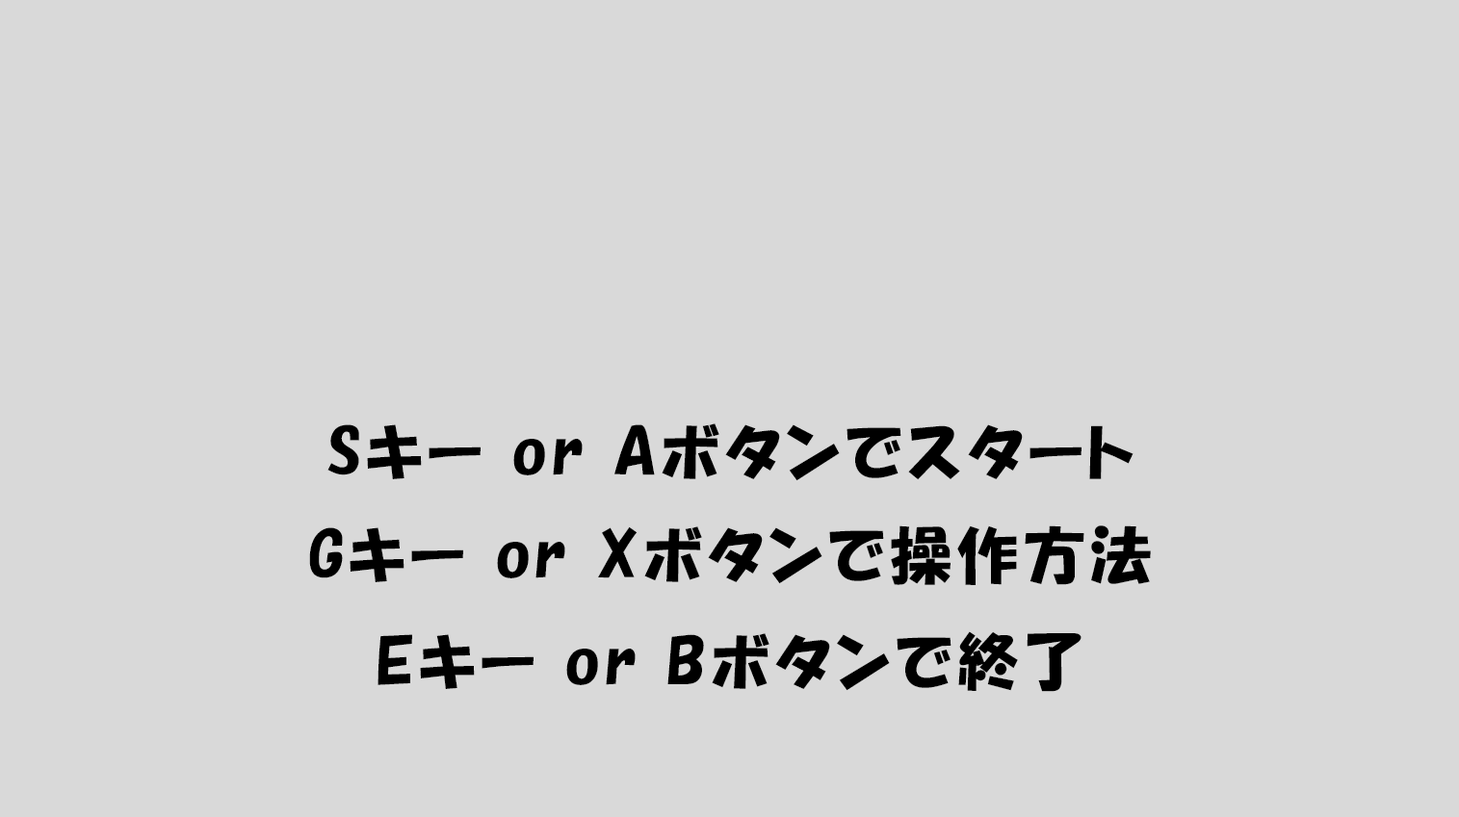
<style>
.page{position:relative;width:1459px;height:817px;background:#d9d9d9}
.page>*{position:absolute;margin:0}
.t1{font:61.6px "HGPSoeiKakupoptai";letter-spacing:0.08em;color:#000000}
</style>
<div class="page">
<p class="t1" style="left:327px;top:424px;width:806px;height:57px">Sキー or Aボタンでスタート</p>
<p class="t1" style="left:309px;top:526px;width:842px;height:59px">Gキー or Xボタンで操作方法</p>
<p class="t1" style="left:377px;top:632px;width:704px;height:60px">Eキー or Bボタンで終了</p>
</div>
